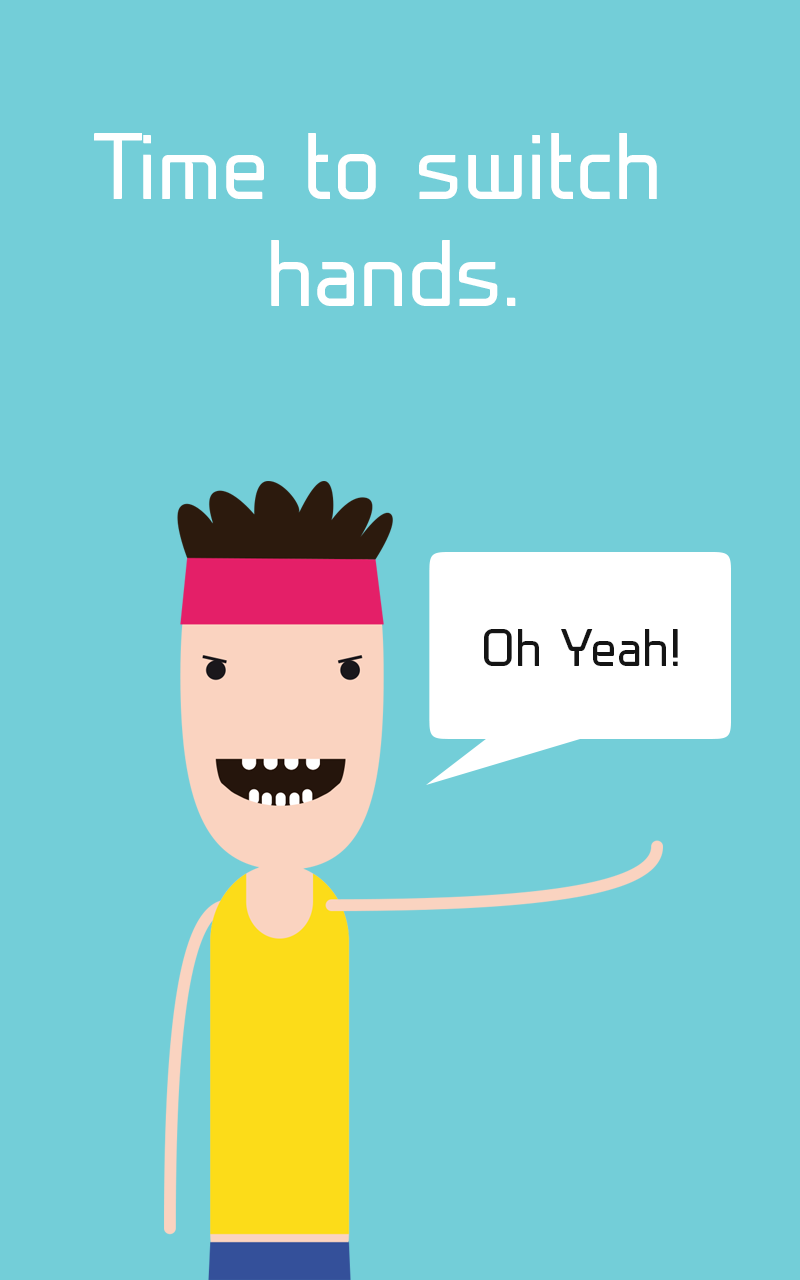
<style>
.page{position:relative;width:800px;height:1280px;background:#73ced8}
.page>*{position:absolute;margin:0}
.t1{font:88.5px "Prime-Regular";color:#ffffff}
.t2{font:49.2px "Prime-Regular";color:#141414}
</style>
<div class="page">
<p class="t1" style="left:94px;top:133px;width:563px;height:173px;text-align:center">Time to switch <br>hands.</p>
<p class="t2" style="left:484px;top:629px;width:194px;height:37px">Oh Yeah!</p>
</div>
